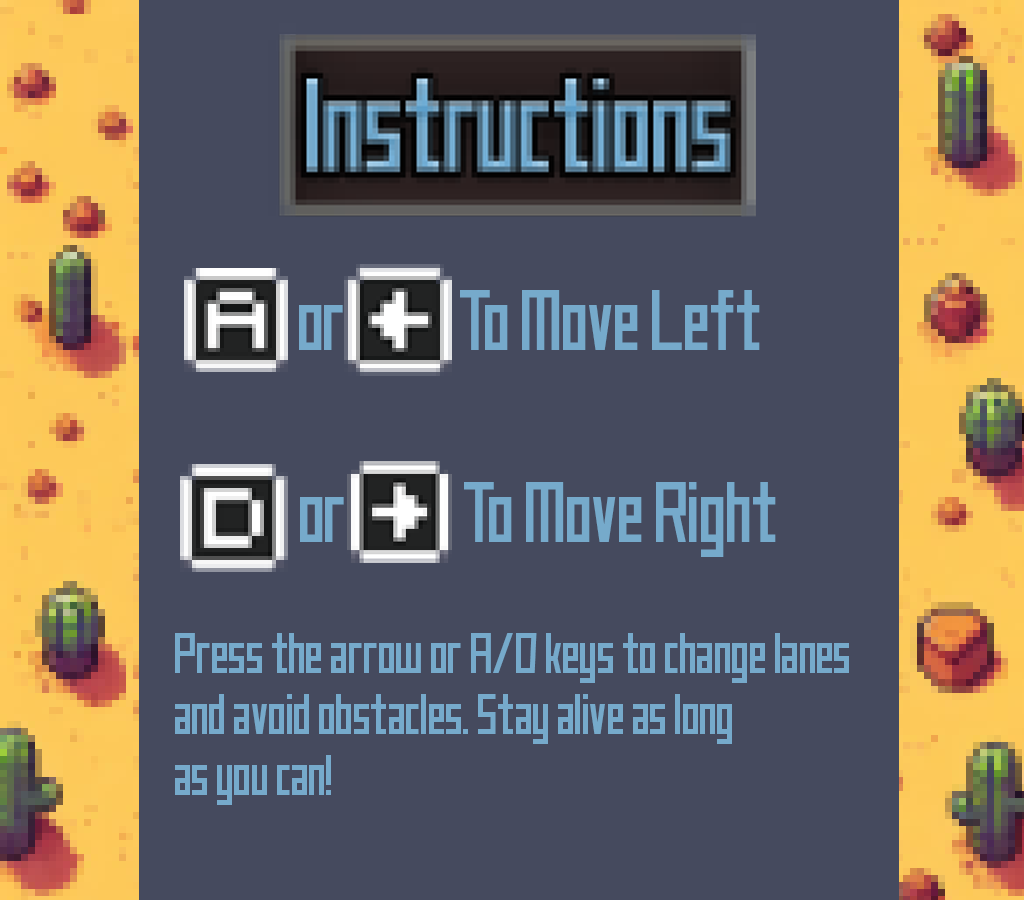
<style>
.page{position:relative;width:1024px;height:900px;background:#454a5e}
.page>*{position:absolute;margin:0}
.t1{font:76px "JustMyType";color:#75aacb}
.t2{font:51px "JustMyType";color:#75aacb}
</style>
<div class="page">
<p class="t1" style="left:460px;top:290px;width:300px;height:60px">To Move Left</p>
<p class="t1" style="left:299px;top:305px;width:44px;height:45px">or</p>
<p class="t1" style="left:464px;top:482px;width:312px;height:75px">To Move Right</p>
<p class="t1" style="left:300px;top:497px;width:44px;height:45px">or</p>
<p class="t2" style="left:175px;top:633px;width:674px;height:172px">Press the arrow or A/D keys to change lanes <br>and avoid obstacles. Stay alive as long <br>as you can!</p>
</div>
